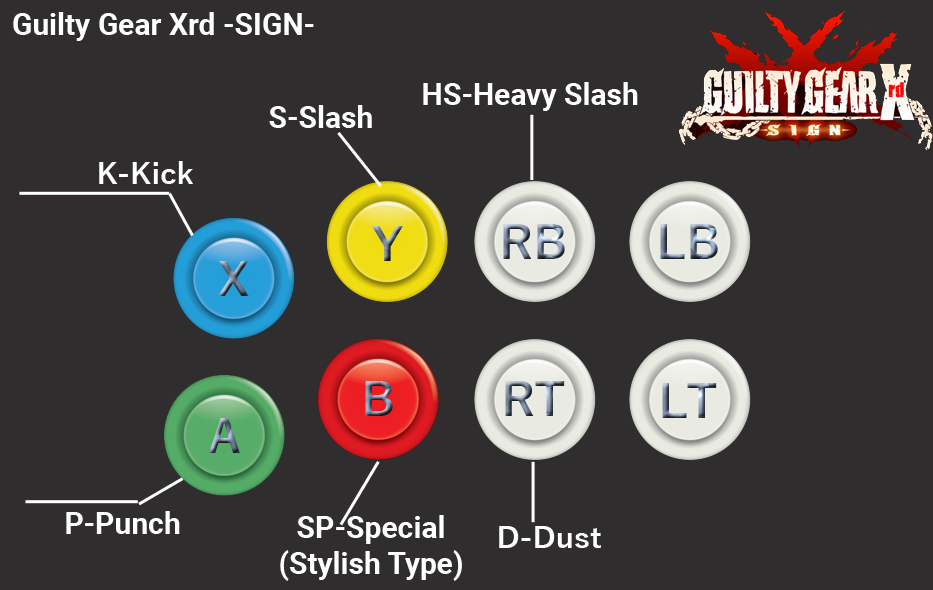
<style>
.page{position:relative;width:933px;height:590px;background:#2f2d2e}
.page>*{position:absolute;margin:0}
.t1{font:30px "Roboto-Bold";color:#ffffff}
.t2{font:30px "YuGothic-Bold";color:#ffffff}
.t3{font:30px/36px "Roboto-Bold";color:#ffffff}
</style>
<div class="page">
<p class="t1" style="left:13px;top:12px;width:301px;height:29px">Guilty Gear Xrd -SIGN-</p>
<p class="t1" style="left:423px;top:82px;width:215px;height:29px">HS-Heavy Slash</p>
<p class="t1" style="left:269px;top:105px;width:103px;height:23px">S-Slash</p>
<p class="t2" style="left:99px;top:161px;width:94px;height:23px">K-Kick</p>
<p class="t1" style="left:66px;top:511px;width:114px;height:23px">P-Punch</p>
<p class="t3" style="left:280px;top:515px;width:182px;height:66px;text-align:center">SP-Special<br>(Stylish Type)</p>
<p class="t2" style="left:499px;top:526px;width:102px;height:22px">D-Dust</p>
</div>
